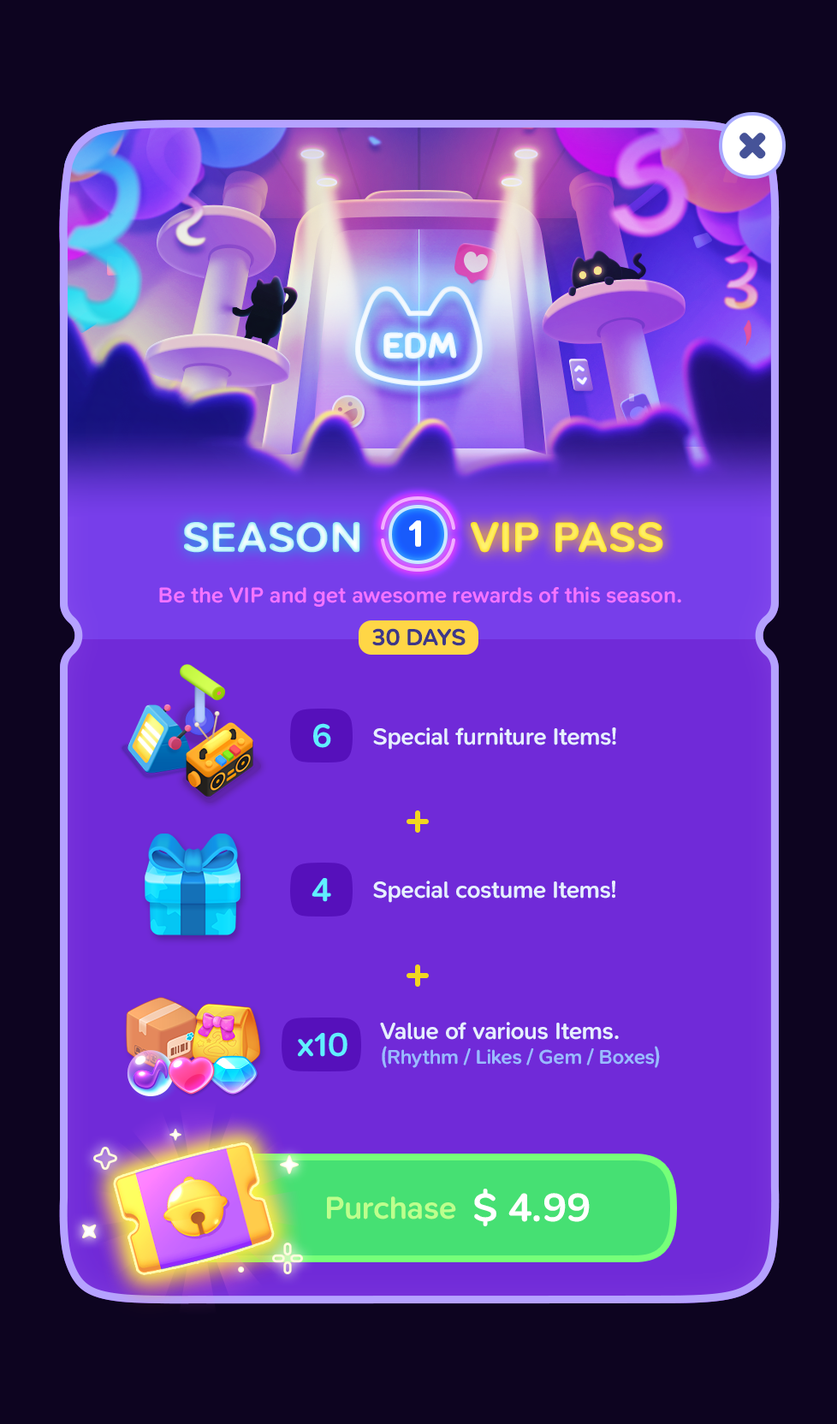
<style>
.page{position:relative;width:837px;height:1424px;background:#0d0420}
.page>*{position:absolute;margin:0}
.t1{font:37.7px "SNPro-SemiBold";letter-spacing:-0.01em;color:#ffffff;text-transform:uppercase;font-weight:bold}
.t2{font:42.8px "SNPro-SemiBold";letter-spacing:-0.01em;text-transform:uppercase;font-weight:bold}
.t3{font:42.8px "SNPro-SemiBold";letter-spacing:-0.01em;color:#ffea52;text-transform:uppercase;font-weight:bold}
.t4{font:22.3px "SNPro-SemiBold";letter-spacing:-0.01em;color:#f474ff}
.t5{font:24px "SNPro-SemiBold";letter-spacing:-0.01em;color:#3d3787;text-transform:uppercase}
.t6{font:34.2px "SNPro-SemiBold";letter-spacing:-0.01em;color:#60effe}
.t7{font:24px "SNPro-SemiBold";letter-spacing:-0.01em;color:#e7efff}
.t8{font:20.5px "SNPro-SemiBold";letter-spacing:-0.01em;color:#9abbff}
.t9{font:41.1px "SNPro-SemiBold";letter-spacing:-0.01em;color:#ffffff;text-transform:uppercase}
.t10{font:32.5px "SNPro-SemiBold";letter-spacing:-0.01em;color:#bdff8d}
</style>
<div class="page">
<p class="t1" style="left:409px;top:520px;width:12px;height:27px">1</p>
<p class="t2" style="left:184px;top:522px;width:176px;height:31px">Season</p>
<p class="t3" style="left:471px;top:522px;width:192px;height:31px">VIP Pass</p>
<p class="t4" style="left:159px;top:586px;width:522px;height:21px">Be the VIP and get awesome rewards of this season.</p>
<p class="t5" style="left:372px;top:628px;width:94px;height:18px">30 Days</p>
<p class="t6" style="left:313px;top:723px;width:18px;height:25px">6</p>
<p class="t7" style="left:373px;top:728px;width:243px;height:22px">Special furniture Items!</p>
<p class="t6" style="left:312px;top:878px;width:19px;height:24px">4</p>
<p class="t7" style="left:373px;top:881px;width:242px;height:22px">Special costume Items!</p>
<p class="t8" style="left:380px;top:1022px;width:280px;height:46px"><span class="t7">Value of various Items.<br></span>(Rhythm / Likes / Gem / Boxes)</p>
<p class="t6" style="left:298px;top:1032px;width:50px;height:25px">x10</p>
<p class="t9" style="left:474px;top:1189px;width:116px;height:38px">$ 4.99</p>
<p class="t10" style="left:327px;top:1197px;width:129px;height:23px">Purchase</p>
</div>
